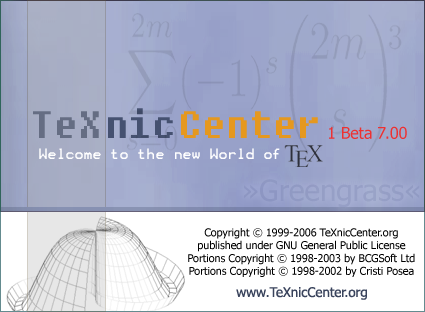
<style>
.page{position:relative;width:425px;height:312px;background:#ffffff}
.page>*{position:absolute;margin:0}
.t1{font:16px "Tahoma";color:#ee3131}
.t2{font:29.3px "Tahoma";color:#959ec5}
.t3{font:10.7px "Tahoma";color:#000000}
.t4{font:13.3px "Tahoma";color:#39435c}
</style>
<div class="page">
<p class="t1" style="left:329px;top:126px;width:78px;height:13px">1 Beta 7.00</p>
<p class="t2" style="left:244px;top:179px;width:176px;height:29px">»Greengrass«</p>
<p class="t3" style="left:188px;top:228px;width:227px;height:49px;text-align:center">Copyright © 1999-2006 TeXnicCenter.org<br>published under GNU General Public License<br>Portions Copyright © 1998-2003 by BCGSoft Ltd<br>Portions Copyright © 1998-2002 by Cristi Posea</p>
<p class="t4" style="left:236px;top:287px;width:131px;height:13px">www.TeXnicCenter.org</p>
</div>
